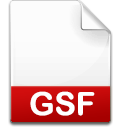
<style>
.page{position:relative;width:128px;height:128px;background:#ffffff}
.page>*{position:absolute;margin:0}
.t1{font:32px "ArialRoundedMTBold";color:#ffffff}
</style>
<div class="page">
<p class="t1" style="left:30px;top:91px;width:65px;height:25px">GSF</p>
</div>
